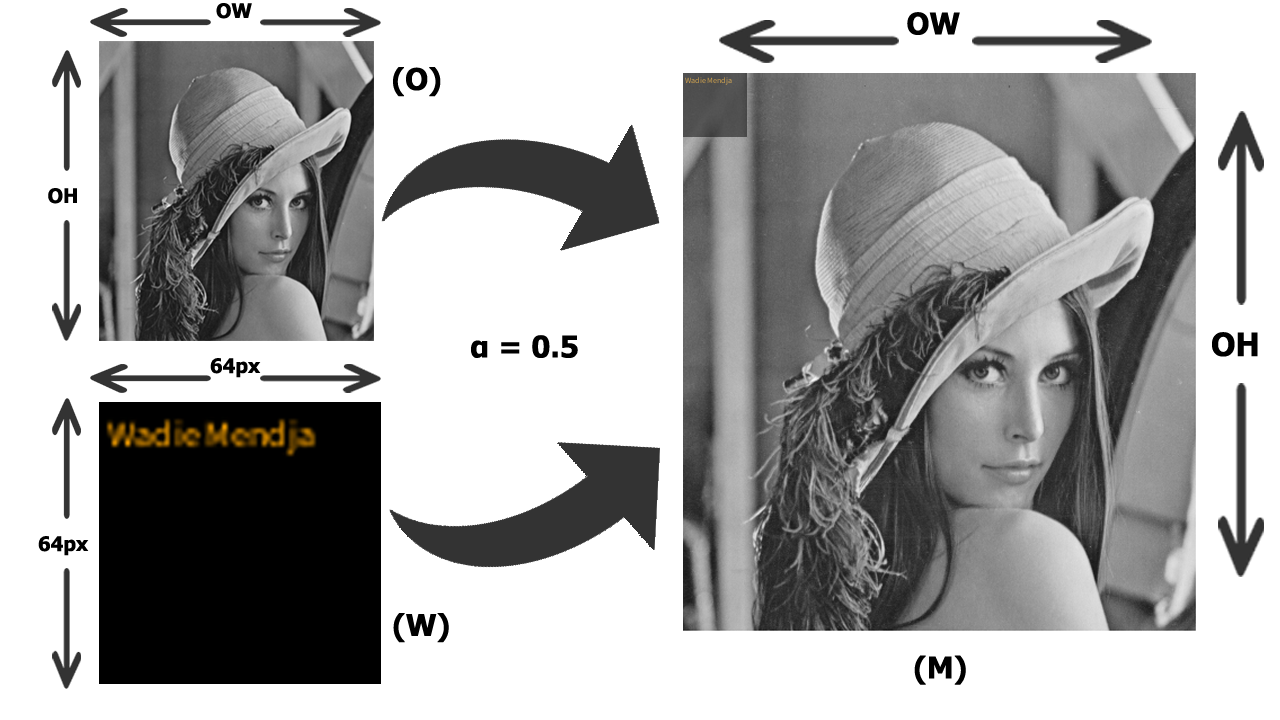
<style>
.page{position:relative;width:1280px;height:720px;background:#ffffff}
.page>*{position:absolute;margin:0}
.t1{font:20px "Tahoma-Bold";color:#000000}
.t2{font:30px "Tahoma-Bold";color:#000000}
.t3{font:32px "Tahoma-Bold";color:#000000}
</style>
<div class="page">
<p class="t1" style="left:216px;top:3px;width:36px;height:16px">OW</p>
<p class="t2" style="left:907px;top:12px;width:53px;height:23px">OW</p>
<p class="t2" style="left:393px;top:67px;width:48px;height:30px">(O)</p>
<p class="t1" style="left:48px;top:188px;width:29px;height:16px">OH</p>
<p class="t2" style="left:471px;top:335px;width:107px;height:23px">α = 0.5</p>
<p class="t3" style="left:1212px;top:332px;width:46px;height:25px">OH</p>
<p class="t1" style="left:210px;top:358px;width:51px;height:20px">64px</p>
<p class="t1" style="left:38px;top:536px;width:51px;height:20px">64px</p>
<p class="t2" style="left:393px;top:613px;width:56px;height:30px">(W)</p>
<p class="t2" style="left:914px;top:655px;width:52px;height:30px">(M)</p>
</div>
